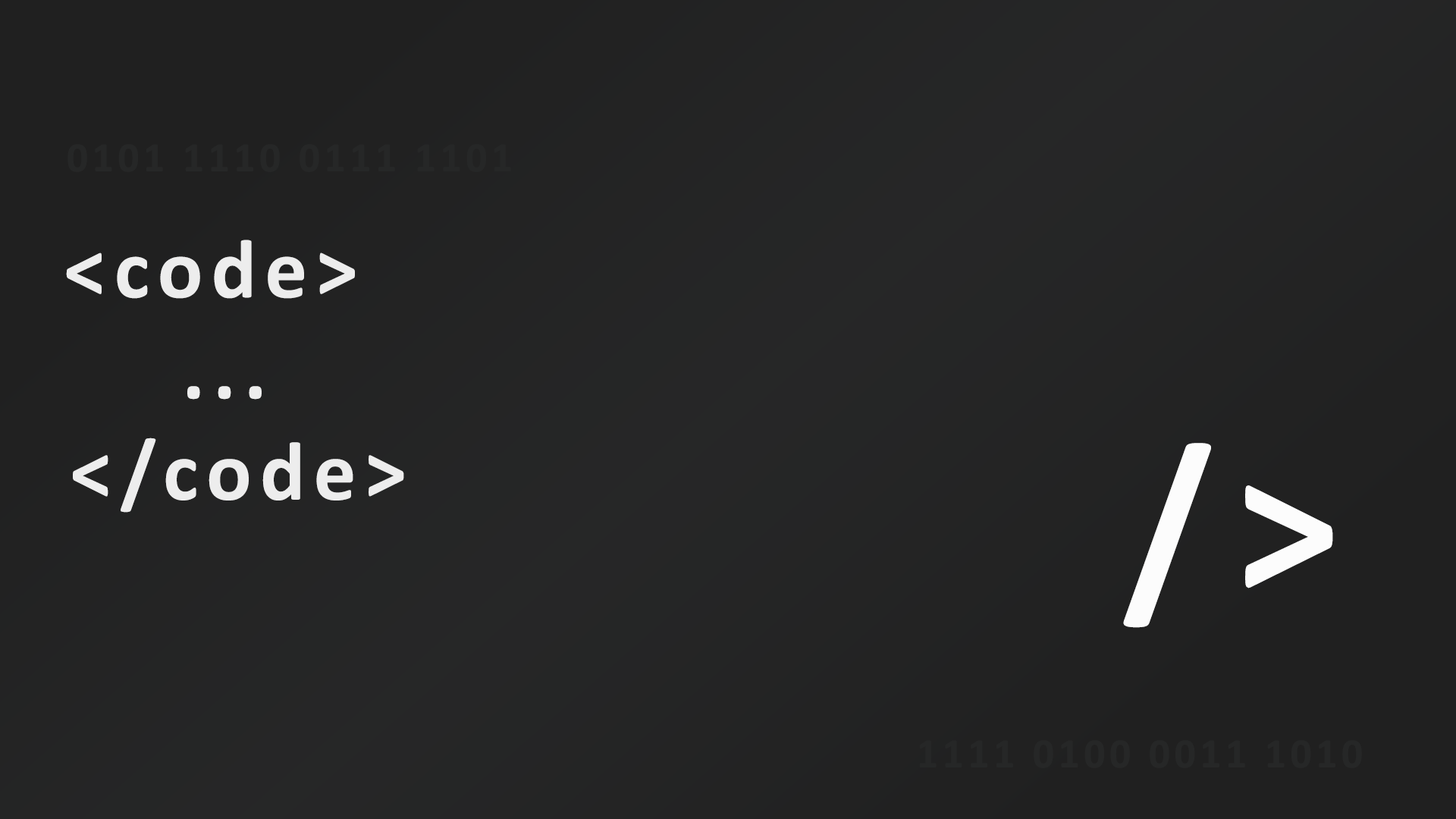
<style>
.page{position:relative;width:1456px;height:819px}
.page>*{position:absolute;margin:0}
.t1{font:42.1px "Calibri-Bold";letter-spacing:0.1em;color:#262727}
.t2{font:84.3px "Calibri-Bold";letter-spacing:0.1em;color:#ededed}
.t3{font:210.6px "Calibri-Bold";letter-spacing:0.1em;color:#fcfcfc}
</style>
<div class="page">
<p class="t1" style="left:67px;top:144px;width:444px;height:28px">0101 1110 0111 1101</p>
<p class="t2" style="left:66px;top:240px;width:338px;height:273px;text-align:center">&lt;code&gt;<br> ...<br>  &lt;/code&gt;</p>
<p class="t3" style="left:1123px;top:443px;width:210px;height:185px">/&gt;</p>
<p class="t1" style="left:919px;top:740px;width:443px;height:28px">1111 0100 0011 1010</p>
</div>
